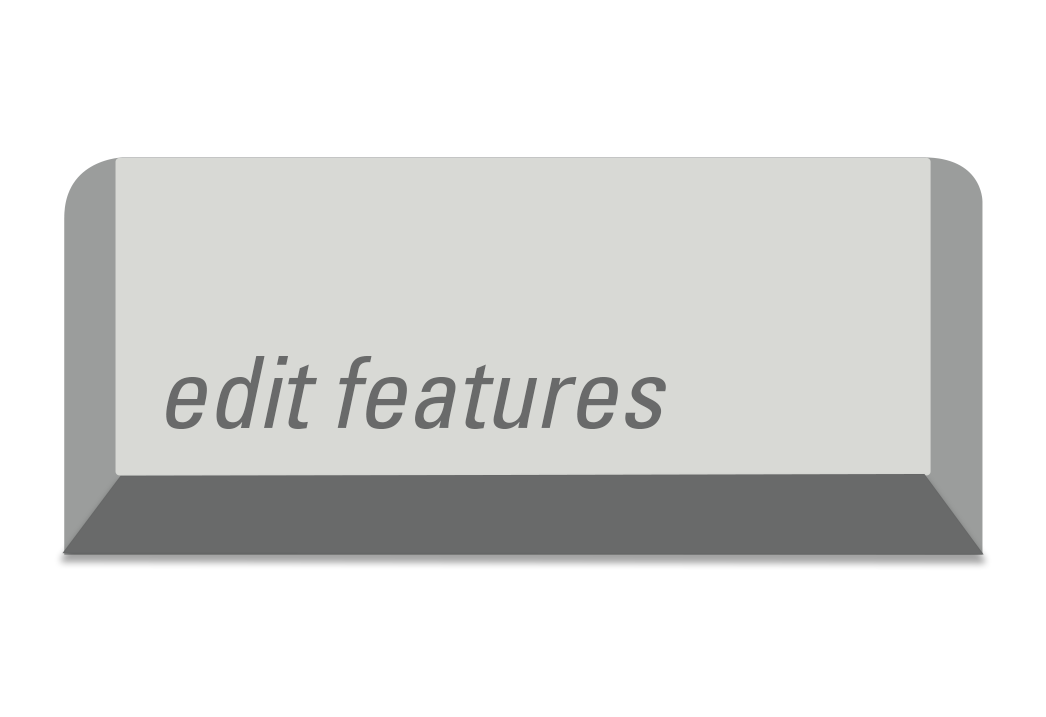
<style>
.page{position:relative;width:1046px;height:717px;background:#ffffff}
.page>*{position:absolute;margin:0}
.t1{font:100.1px "Univers-CondensedOblique";color:#696a6a}
</style>
<div class="page">
<p class="t1" style="left:166px;top:355px;width:500px;height:74px">edit features</p>
</div>
